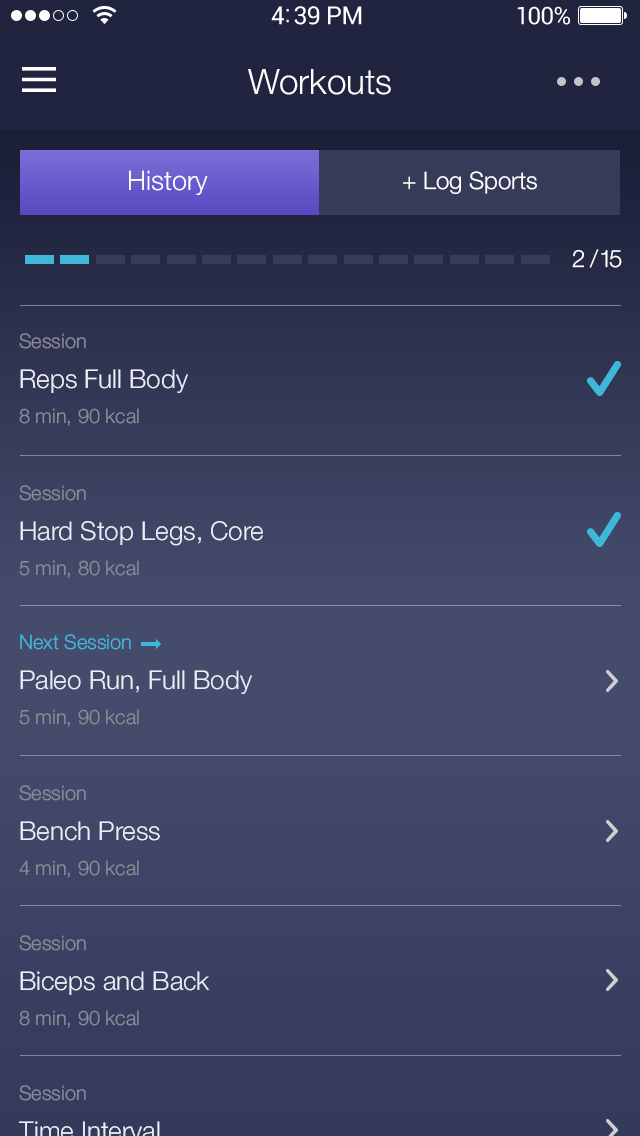
<style>
.page{position:relative;width:640px;height:1136px}
.page>*{position:absolute;margin:0}
.t1{font:35px "HelveticaNeue-Light";color:#ffffff}
.t2{font:27px "HelveticaNeue-Light";color:#ffffff}
.t3{font:24px "HelveticaNeue-Light";color:#ffffff}
.t4{font:24px "HelveticaNeue-Light";letter-spacing:-0.12em;color:#ffffff}
.t5{font:20px "HelveticaNeue-Light";color:#8b8b97}
.t6{font:26px "HelveticaNeue-Light";color:#eeeef6}
.t7{font:20px "HelveticaNeue-Light";color:#3fb7d9}
</style>
<div class="page">
<p class="t1" style="left:248px;top:69px;width:143px;height:26px">Workouts</p>
<p class="t2" style="left:129px;top:170px;width:79px;height:26px">History</p>
<p class="t3" style="left:403px;top:171px;width:134px;height:23px">+ Log Sports</p>
<p class="t4" style="left:572px;top:249px;width:50px;height:19px">2  / 15</p>
<p class="t5" style="left:19px;top:333px;width:67px;height:16px">Session</p>
<p class="t6" style="left:20px;top:369px;width:168px;height:24px">Reps Full Body</p>
<p class="t5" style="left:19px;top:408px;width:120px;height:18px">8 min, 90 kcal</p>
<p class="t5" style="left:19px;top:485px;width:67px;height:16px">Session</p>
<p class="t6" style="left:20px;top:521px;width:243px;height:25px">Hard Stop Legs, Core</p>
<p class="t5" style="left:19px;top:560px;width:120px;height:18px">5 min, 80 kcal</p>
<p class="t7" style="left:20px;top:634px;width:111px;height:16px">Next Session</p>
<p class="t6" style="left:20px;top:670px;width:232px;height:24px">Paleo Run, Full Body</p>
<p class="t5" style="left:19px;top:709px;width:120px;height:18px">5 min, 90 kcal</p>
<p class="t5" style="left:19px;top:785px;width:67px;height:16px">Session</p>
<p class="t6" style="left:20px;top:821px;width:140px;height:20px">Bench Press</p>
<p class="t5" style="left:19px;top:860px;width:120px;height:18px">4 min, 90 kcal</p>
<p class="t5" style="left:19px;top:935px;width:67px;height:16px">Session</p>
<p class="t6" style="left:20px;top:971px;width:190px;height:24px">Biceps and Back</p>
<p class="t5" style="left:19px;top:1010px;width:120px;height:18px">8 min, 90 kcal</p>
<p class="t5" style="left:19px;top:1085px;width:67px;height:16px">Session</p>
</div>
